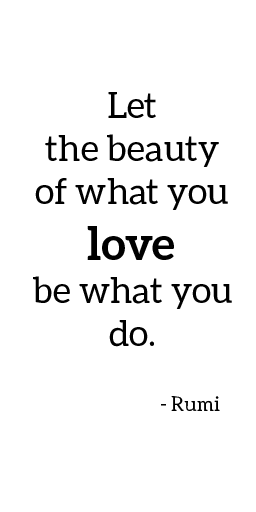
<style>
.page{position:relative;width:256px;height:512px;background:#ffffff}
.page>*{position:absolute;margin:0}
.t1{font:36px "Aleo-Regular";color:#000000}
.t2{font:46px "Aleo-Bold";color:#000000}
.t3{font:20px "Aleo-Regular";color:#000000}
</style>
<div class="page">
<p class="t1" style="left:33px;top:92px;width:199px;height:319px;text-align:center">Let <br>the beauty <br>of what you <br><span class="t2">love <br></span>be what you <br>do. <br><br><span class="t3">   - Rumi</span></p>
</div>
